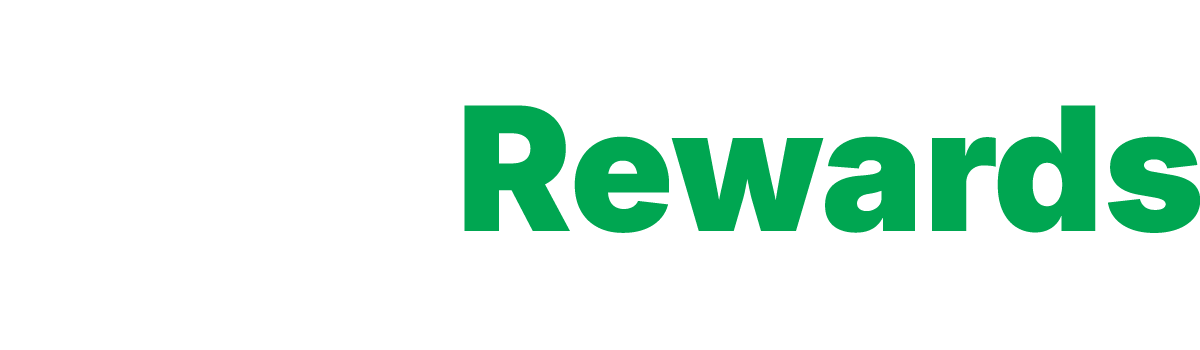
<style>
.page{position:relative;width:1200px;height:350px;background:#ffffff}
.page>*{position:absolute;margin:0}
.t1{font:172.3px "Inter18pt-Black";color:#00a651}
.t2{font:172.3px "Inter18pt-Black";color:#ffffff}
</style>
<div class="page">
<p class="t1" style="left:5px;top:103px;width:1196px;height:164px"><span class="t2">Open</span>Rewards</p>
</div>
